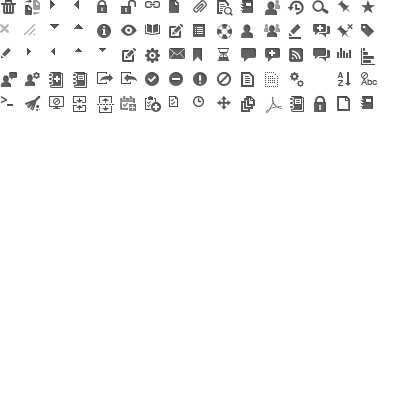
<style>
.page{position:relative;width:400px;height:400px;background:#ffffff}
.page>*{position:absolute;margin:0}
.t1{font:9px "HelveticaNeue";color:#4e4e4e}
</style>
<div class="page">
<p class="t1" style="left:361px;top:79px;width:16px;height:6px">Abc</p>
</div>
